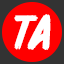
<style>
.page{position:relative;width:64px;height:64px;background:#ff0000}
.page>*{position:absolute;margin:0}
.t1{font:48px "MightyBrush";color:#ffffff;font-weight:bold}
</style>
<div class="page">
<p class="t1" style="left:14px;top:14px;width:37px;height:36px">TA</p>
</div>
